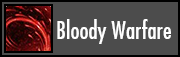
<style>
.page{position:relative;width:180px;height:57px;background:#4c4c4c}
.page>*{position:absolute;margin:0}
.t1{font:24px "FuturaCondensed";color:#ffffff}
</style>
<div class="page">
<p class="t1" style="left:57px;top:19px;width:114px;height:25px">Bloody Warfare</p>
</div>
